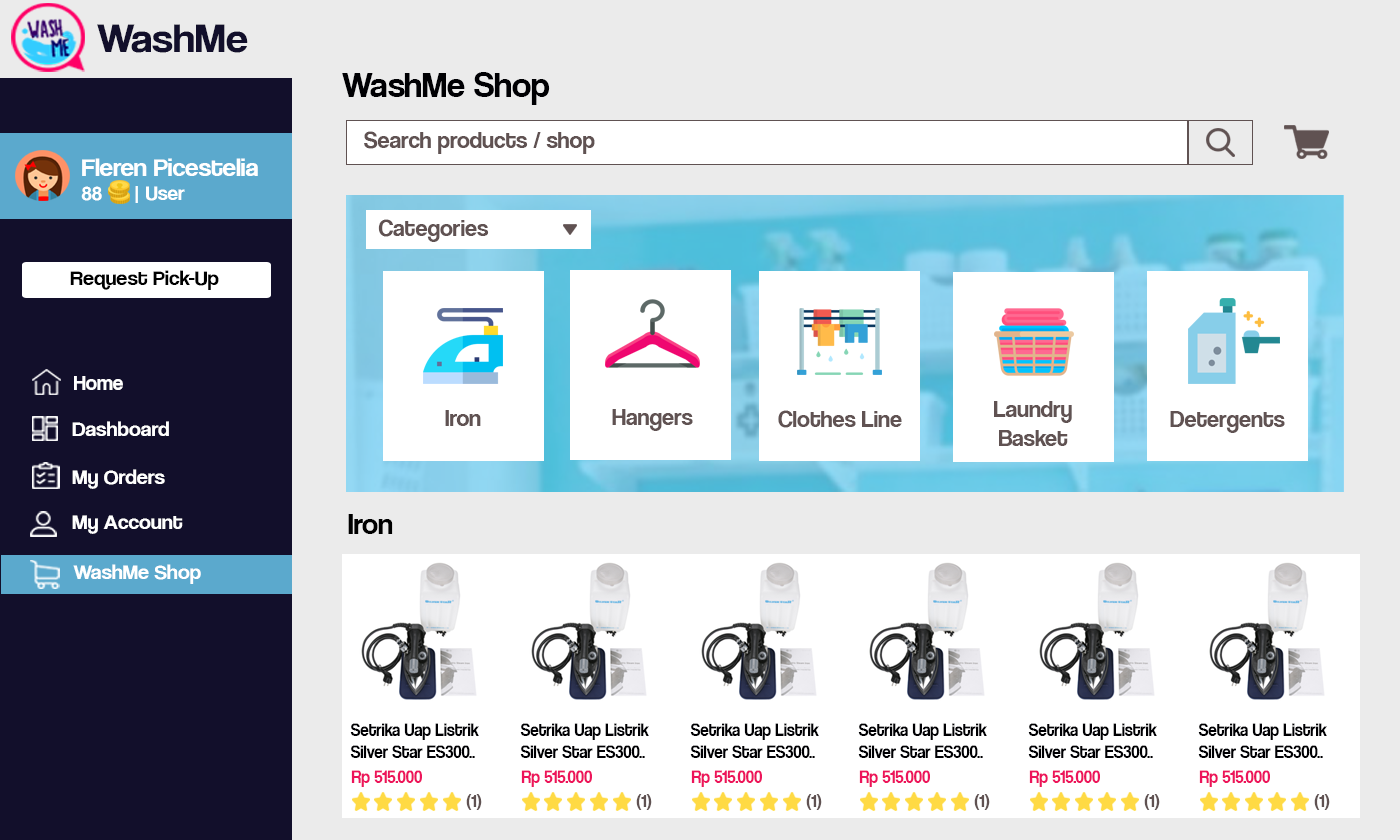
<style>
.page{position:relative;width:1400px;height:840px;background:#ffffff}
.page>*{position:absolute;margin:0}
.t1{font:42.1px "CoolveticaRg-Regular";color:#120f2b;scale:1.05 1}
.t2{font:36px "CoolveticaRg-Regular";color:#000003}
.t3{font:24px "CoolveticaRg-Regular";color:#605252}
.t4{font:25.2px "CoolveticaRg-Regular";color:#ffffff;scale:1.05 1}
.t5{font:20px "CoolveticaRg-Regular";color:#ffffff;scale:1.05 1}
.t6{font:21px "CoolveticaRg-Regular";color:#000000;scale:1.05 1}
.t7{font:21px "CoolveticaRg-Regular";color:#ffffff}
.t8{font:21px "CoolveticaRg-Regular";color:#ffffff;scale:1.05 1}
.t9{font:30px "CoolveticaRg-Regular";color:#000000}
.t10{font:18px "CoolveticaRg-Regular";color:#000003;scale:0.94 1}
.t11{font:18px "CoolveticaRg-Regular";color:#ed145b;scale:0.94 1}
.t12{font:18px "CoolveticaRg-Regular";color:#605252}
</style>
<div class="page">
<p class="t1" style="left:97px;top:24px;width:151px;height:29px">WashMe</p>
<p class="t2" style="left:342px;top:72px;width:208px;height:33px">WashMe Shop</p>
<p class="t3" style="left:364px;top:131px;width:231px;height:23px">Search products / shop</p>
<p class="t4" style="left:81px;top:158px;width:177px;height:45px">Fleren Picestelia<br><span class="t5">88      | User</span></p>
<p class="t3" style="left:378px;top:219px;width:111px;height:23px">Categories</p>
<p class="t6" style="left:70px;top:270px;width:149px;height:20px">Request Pick-Up</p>
<p class="t7" style="left:74px;top:376px;width:49px;height:14px">Home</p>
<p class="t3" style="left:994px;top:401px;width:78px;height:45px;text-align:center">Laundry<br>Basket</p>
<p class="t3" style="left:445px;top:410px;width:36px;height:16px">Iron</p>
<p class="t3" style="left:612px;top:409px;width:81px;height:22px">Hangers</p>
<p class="t3" style="left:778px;top:410px;width:124px;height:18px">Clothes Line</p>
<p class="t3" style="left:1170px;top:411px;width:115px;height:22px">Detergents</p>
<p class="t8" style="left:72px;top:421px;width:97px;height:15px">Dashboard</p>
<p class="t8" style="left:72px;top:469px;width:93px;height:20px">My Orders</p>
<p class="t8" style="left:72px;top:515px;width:111px;height:19px">My Account</p>
<p class="t9" style="left:348px;top:514px;width:45px;height:20px">Iron</p>
<p class="t8" style="left:73px;top:564px;width:128px;height:20px">WashMe Shop</p>
<p class="t10" style="left:350px;top:723px;width:129px;height:35px">Setrika Uap Listrik<br>Silver Star ES300..</p>
<p class="t10" style="left:520px;top:723px;width:129px;height:35px">Setrika Uap Listrik<br>Silver Star ES300..</p>
<p class="t10" style="left:690px;top:723px;width:129px;height:35px">Setrika Uap Listrik<br>Silver Star ES300..</p>
<p class="t10" style="left:858px;top:723px;width:129px;height:35px">Setrika Uap Listrik<br>Silver Star ES300..</p>
<p class="t10" style="left:1028px;top:723px;width:129px;height:35px">Setrika Uap Listrik<br>Silver Star ES300..</p>
<p class="t10" style="left:1198px;top:723px;width:129px;height:35px">Setrika Uap Listrik<br>Silver Star ES300..</p>
<p class="t11" style="left:351px;top:770px;width:71px;height:17px">Rp 515.000</p>
<p class="t11" style="left:521px;top:770px;width:71px;height:17px">Rp 515.000</p>
<p class="t11" style="left:691px;top:770px;width:71px;height:17px">Rp 515.000</p>
<p class="t11" style="left:859px;top:770px;width:71px;height:17px">Rp 515.000</p>
<p class="t11" style="left:1029px;top:770px;width:71px;height:17px">Rp 515.000</p>
<p class="t11" style="left:1199px;top:770px;width:71px;height:17px">Rp 515.000</p>
<p class="t12" style="left:466px;top:794px;width:16px;height:16px">(1)</p>
<p class="t12" style="left:636px;top:794px;width:16px;height:16px">(1)</p>
<p class="t12" style="left:806px;top:794px;width:16px;height:16px">(1)</p>
<p class="t12" style="left:974px;top:794px;width:16px;height:16px">(1)</p>
<p class="t12" style="left:1144px;top:794px;width:16px;height:16px">(1)</p>
<p class="t12" style="left:1314px;top:794px;width:16px;height:16px">(1)</p>
</div>
